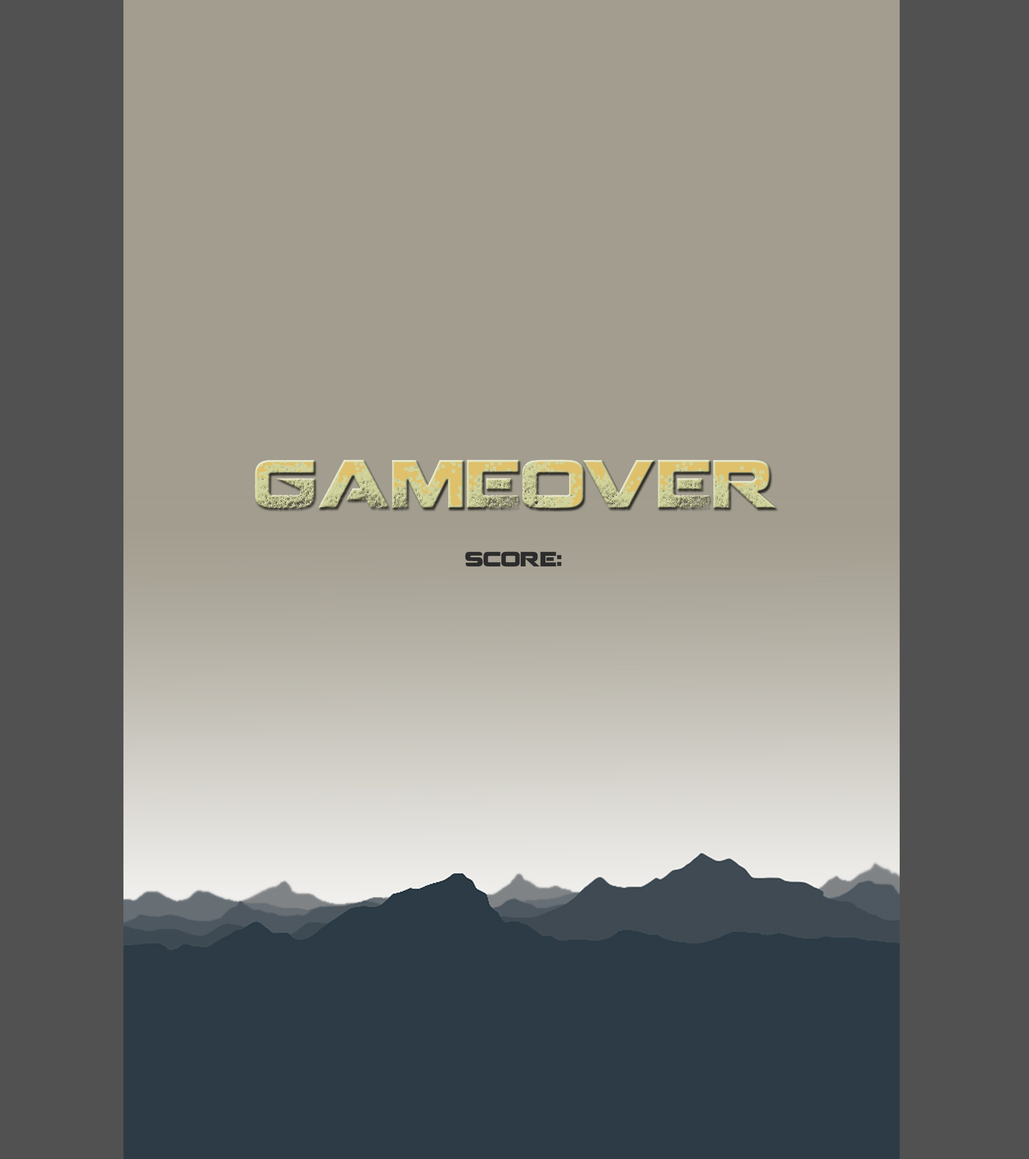
<style>
.page{position:relative;width:1029px;height:1159px;background:#a39d8f}
.page>*{position:absolute;margin:0}
.t1{font:68.1px "Coalition";letter-spacing:0.01em}
.t2{font:20.4px "Coalition";letter-spacing:0.01em;color:#2c2c2c}
</style>
<div class="page">
<p class="t1" style="left:255px;top:459px;width:522px;height:50px">GAMEOVER</p>
<p class="t2" style="left:465px;top:551px;width:97px;height:16px">score:</p>
</div>
